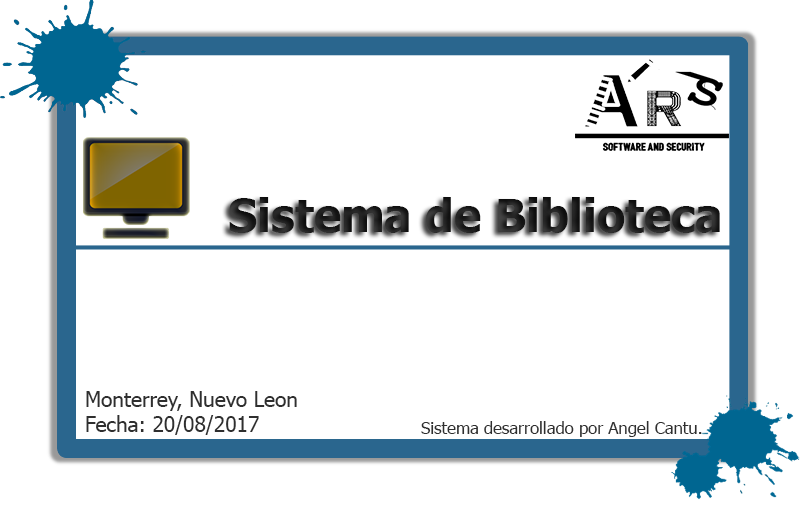
<style>
.page{position:relative;width:800px;height:507px;background:#ffffff}
.page>*{position:absolute;margin:0}
.t1{font:45.8px "Tahoma-Bold";color:#202020}
.t2{font:20.8px "Tahoma";color:#2f2f2f}
.t3{font:16.7px "Tahoma";color:#2f2f2f}
</style>
<div class="page">
<p class="t1" style="left:229px;top:197px;width:491px;height:36px">Sistema de Biblioteca</p>
<p class="t2" style="left:86px;top:391px;width:211px;height:44px">Monterrey, Nuevo Leon<br>Fecha: 20/08/2017</p>
<p class="t3" style="left:421px;top:421px;width:281px;height:16px">Sistema desarrollado por Angel Cantu.</p>
</div>
